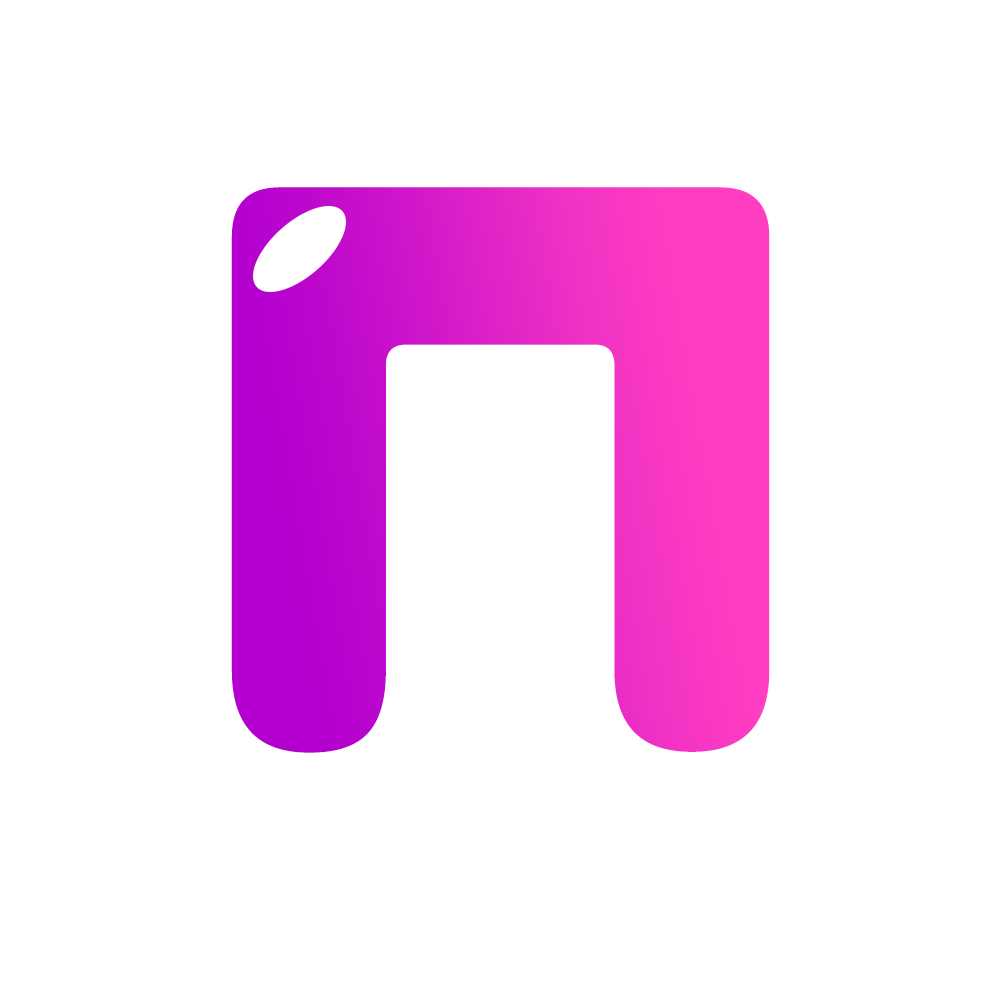
<style>
.page{position:relative;width:1000px;height:1000px;background:#ffffff}
.page>*{position:absolute;margin:0}
.t1{font:797.1px "Zorque-Regular"}
</style>
<div class="page">
<p class="t1" style="left:231px;top:187px;width:539px;height:566px">N</p>
<p class="t1" style="left:245px;top:193px;width:539px;height:566px">N</p>
</div>
